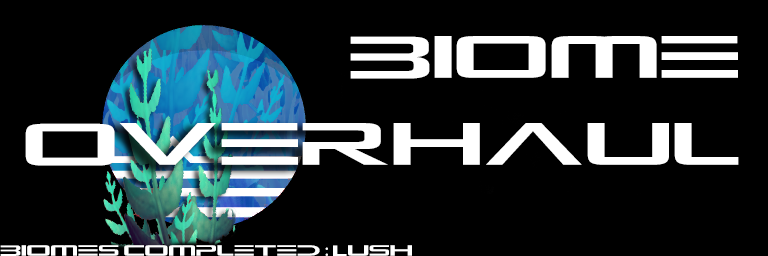
<style>
.page{position:relative;width:768px;height:256px;background:#000000}
.page>*{position:absolute;margin:0}
.t1{font:72px "Alien-Resurrection-Regular";color:#ffffff}
.t2{font:18px "Alien-Resurrection-Regular";color:#ffffff}
.t3{font:18px "MyriadPro-Regular";color:#ffffff}
</style>
<div class="page">
<p class="t1" style="left:25px;top:36px;width:714px;height:130px;text-align:right">Biome<br>Overhaul</p>
<p class="t2" style="left:0px;top:245px;width:412px;height:11px">Biomes completed <span class="t3">: </span>Lush</p>
</div>
